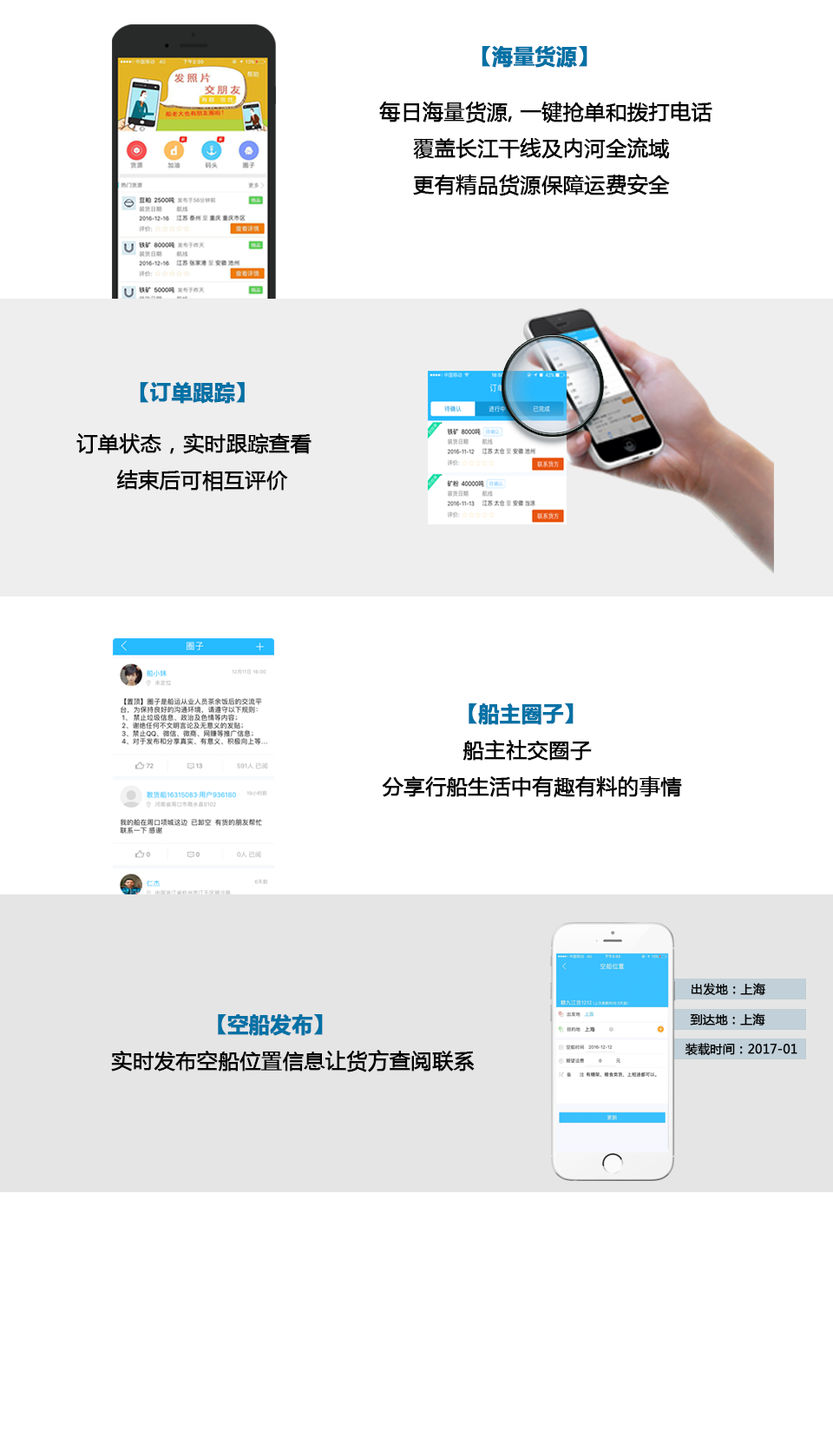
<style>
.page{position:relative;width:833px;height:1431px;background:#ffffff}
.page>*{position:absolute;margin:0}
.t1{font:20.8px "MicrosoftYaHei-Bold";color:#0271a5;font-weight:bold}
.t2{font:20.8px "MicrosoftYaHei";color:#040404;font-weight:bold}
.t3{font:12.2px "MicrosoftYaHei";color:#040404;font-weight:bold}
</style>
<div class="page">
<p class="t1" style="left:482px;top:46px;width:106px;height:22px">【海量货源】</p>
<p class="t2" style="left:379px;top:102px;width:334px;height:94px">每日海量货源, 一键抢单和拨打电话<br>     覆盖长江干线及内河全流域<br>     更有精品货源保障运费安全</p>
<p class="t1" style="left:140px;top:382px;width:105px;height:22px">【订单跟踪】</p>
<p class="t2" style="left:76px;top:433px;width:236px;height:58px">订单状态，实时跟踪查看<br>      结束后可相互评价</p>
<p class="t2" style="left:382px;top:703px;width:300px;height:95px"><span class="t1">           【船主圈子】<br></span>            船主社交圈子<br>分享行船生活中有趣有料的事情</p>
<p class="t3" style="left:691px;top:983px;width:75px;height:12px">出发地：上海</p>
<p class="t3" style="left:690px;top:1013px;width:76px;height:12px">到达地：上海</p>
<p class="t2" style="left:111px;top:1014px;width:364px;height:58px"><span class="t1">              【空船发布】<br></span>实时发布空船位置信息让货方查阅联系</p>
<p class="t3" style="left:685px;top:1043px;width:113px;height:13px">装载时间：2017-01</p>
</div>
